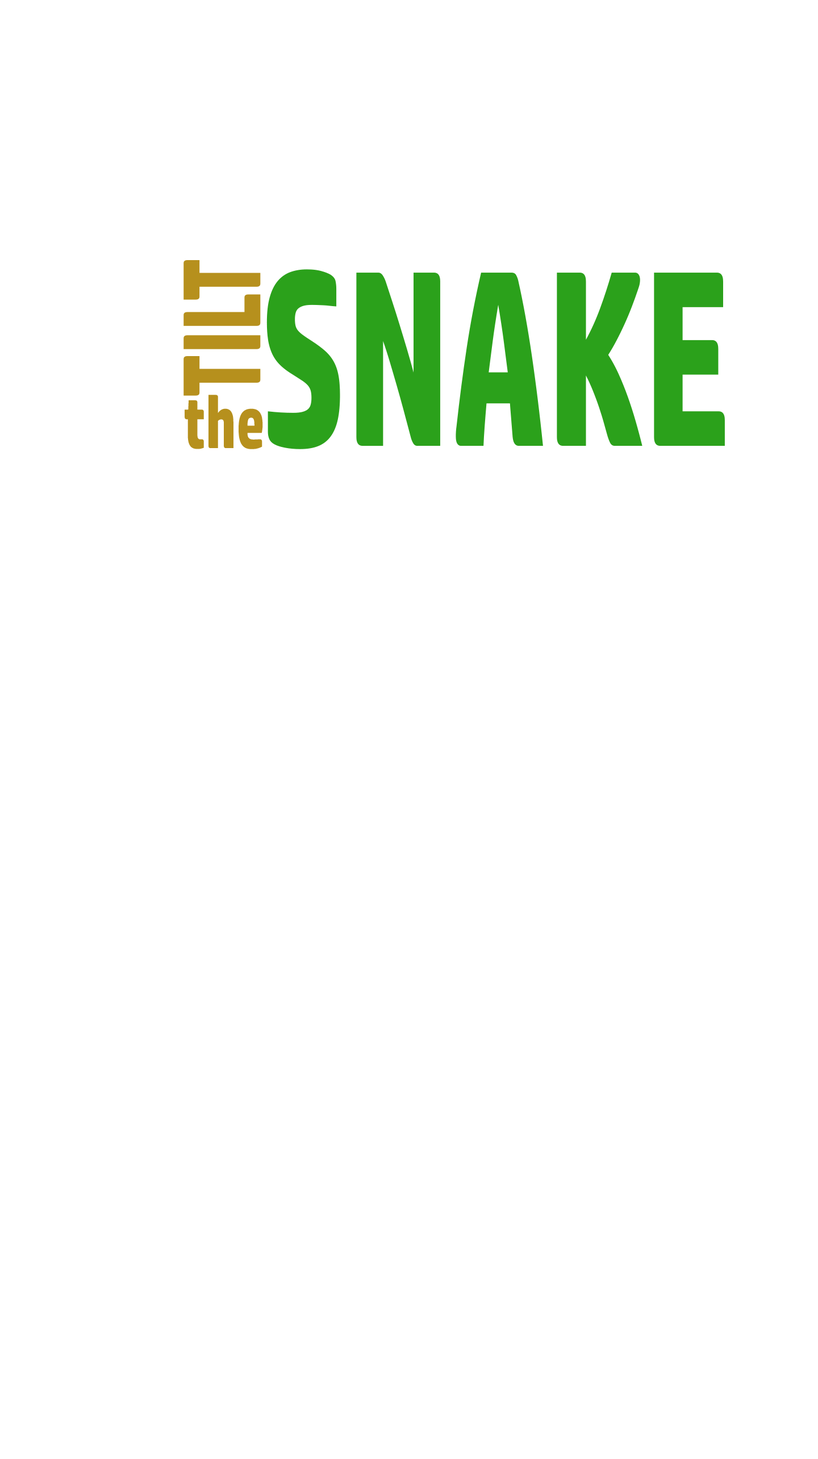
<style>
.page{position:relative;width:818px;height:1459px;background:#ffffff}
.page>*{position:absolute;margin:0}
.t1{font:110.6px "HPSimplified-Bold";color:#b6901d;scale:0.71 1}
.t2{font:249.8px "HPSimplified-Bold";color:#2ba11b;scale:0.67 1}
.t3{font:73.9px "HPSimplified-Bold";color:#b6901d;scale:0.77 1}
</style>
<div class="page">
<p class="t1" style="left:183px;top:260px;width:78px;height:136px;rotate:-90deg">TILT</p>
<p class="t2" style="left:266px;top:269px;width:458px;height:180px">SNAKE</p>
<p class="t3" style="left:185px;top:395px;width:78px;height:54px">the</p>
</div>
